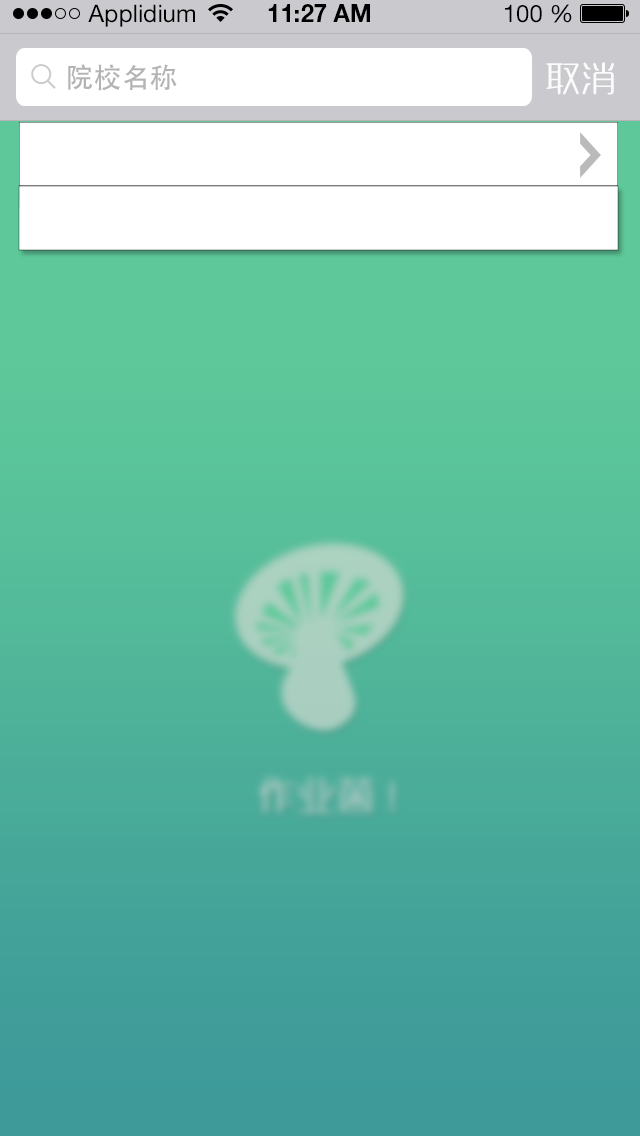
<style>
.page{position:relative;width:640px;height:1136px}
.page>*{position:absolute;margin:0}
.t1{font:24px "HelveticaNeueLTStd-Roman";color:#000000}
.t2{font:24px "HelveticaNeueLTStd-Bd";color:#000000}
.t3{font:28px "AdobeHeitiStd-Regular";color:#b3b3b3}
.t4{font:32.7px "MFYaYuan_Noncommercial-Regular";letter-spacing:0.1em;color:#fbfbfb}
</style>
<div class="page">
<p class="t1" style="left:88px;top:4px;width:107px;height:23px">Applidium</p>
<p class="t2" style="left:268px;top:4px;width:102px;height:18px">11:27 AM</p>
<p class="t1" style="left:505px;top:4px;width:67px;height:19px">100 %</p>
<p class="t3" style="left:68px;top:64px;width:109px;height:27px">院校名称</p>
<p class="t4" style="left:546px;top:62px;width:68px;height:33px">取消</p>
</div>
